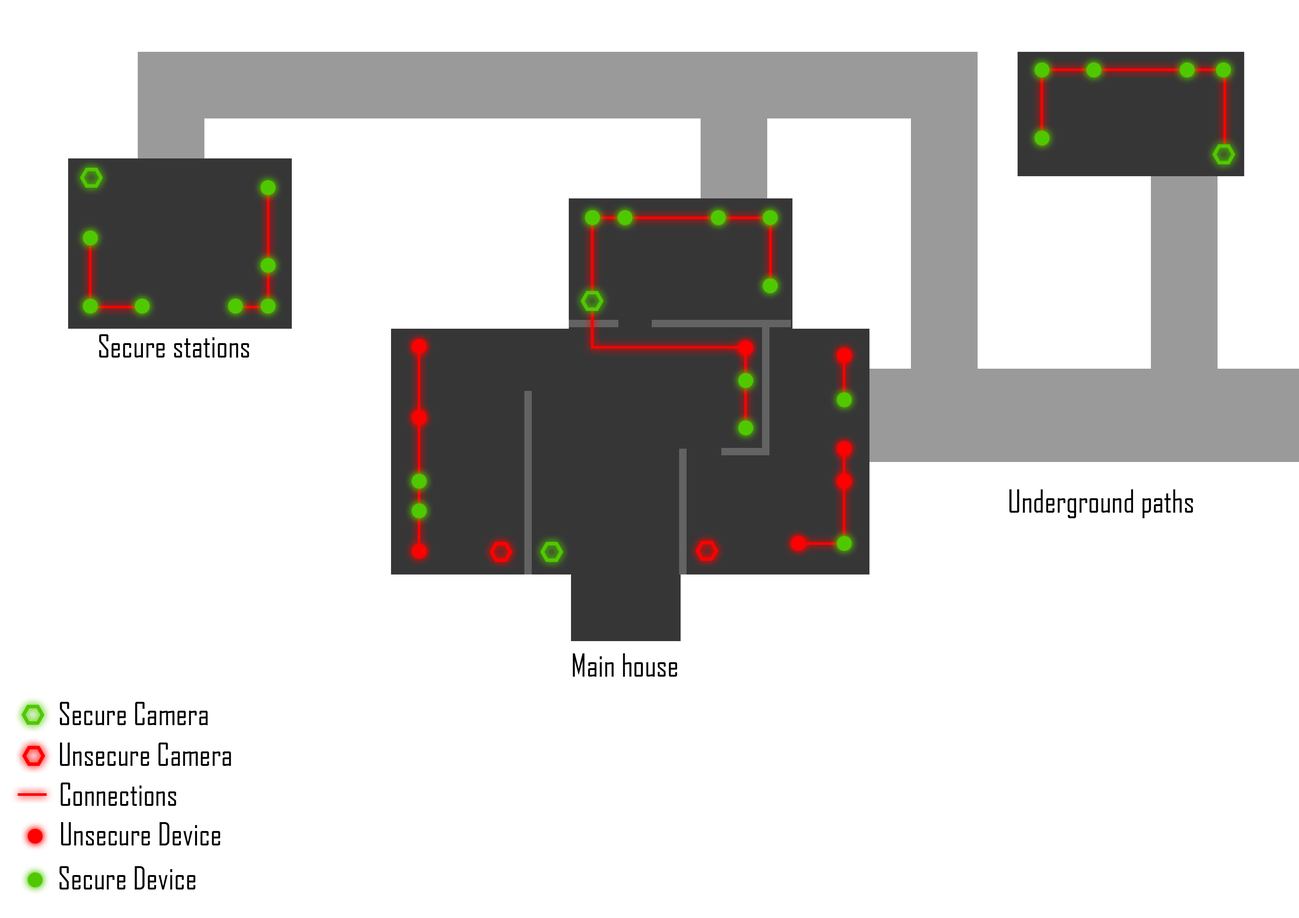
<style>
.page{position:relative;width:1299px;height:918px;background:#ffffff}
.page>*{position:absolute;margin:0}
.t1{font:30.9px "AgencyFB-Reg";color:#000000}
</style>
<div class="page">
<p class="t1" style="left:99px;top:334px;width:150px;height:24px">Secure stations</p>
<p class="t1" style="left:1009px;top:489px;width:184px;height:29px">Underground paths</p>
<p class="t1" style="left:573px;top:653px;width:104px;height:24px">Main house</p>
<p class="t1" style="left:60px;top:702px;width:148px;height:23px">Secure Camera</p>
<p class="t1" style="left:60px;top:743px;width:171px;height:23px">Unsecure Camera</p>
<p class="t1" style="left:61px;top:783px;width:115px;height:23px">Connections</p>
<p class="t1" style="left:61px;top:822px;width:159px;height:24px">Unsecure Device</p>
<p class="t1" style="left:59px;top:866px;width:136px;height:24px">Secure Device</p>
</div>
